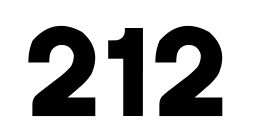
<style>
.page{position:relative;width:264px;height:140px;background:#ffffff}
.page>*{position:absolute;margin:0}
.t1{font:124.4px "Ccrige-Regular";color:#000000}
</style>
<div class="page">
<p class="t1" style="left:28px;top:25px;width:195px;height:92px">212</p>
</div>
